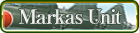
<style>
.page{position:relative;width:139px;height:33px}
.page>*{position:absolute;margin:0}
.t1{font:20px "RyuminPro-ExBold";letter-spacing:-0.08em}
</style>
<div class="page">
<p class="t1" style="left:19px;top:9px;width:103px;height:15px">Markas Unit</p>
</div>
